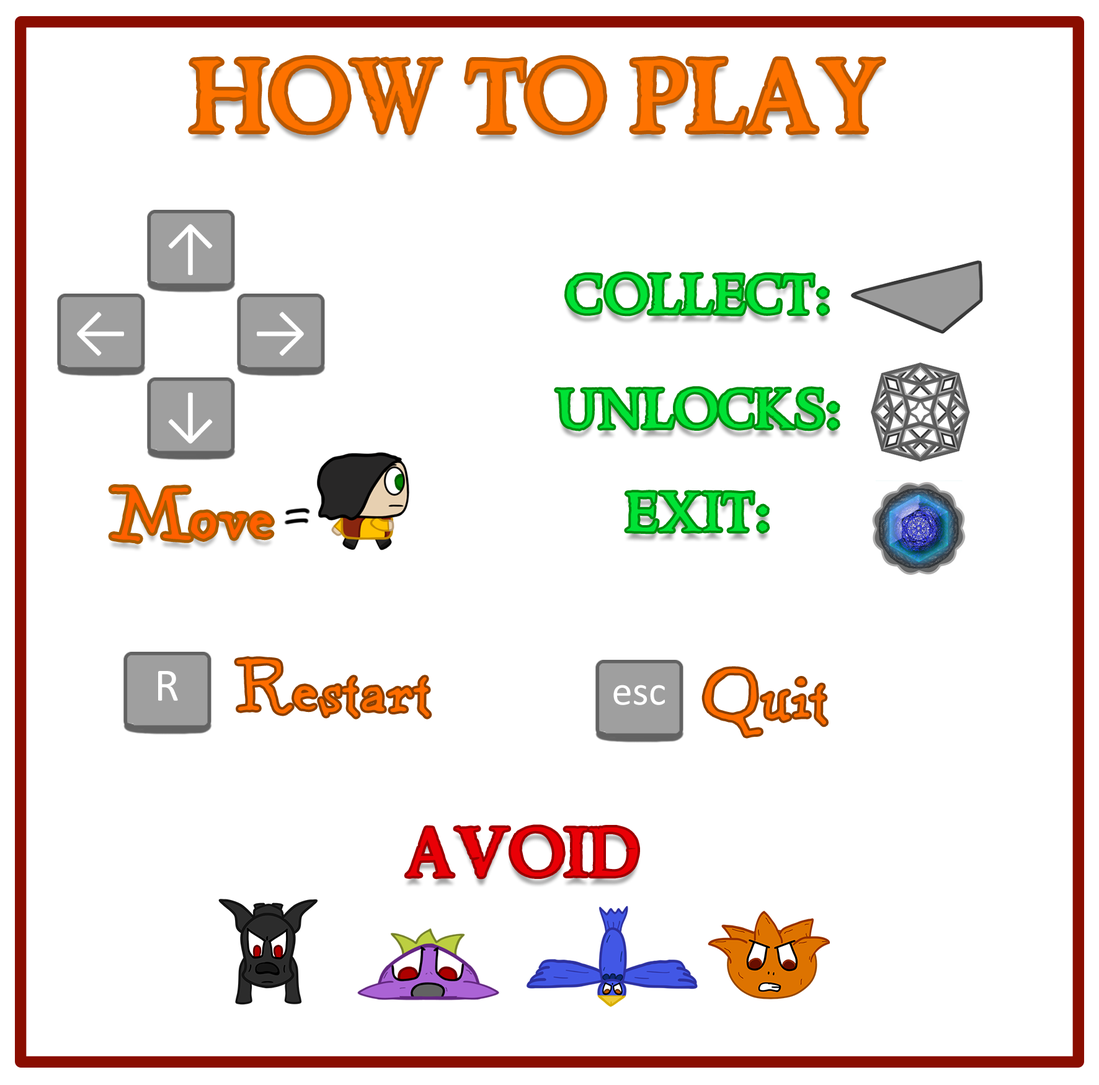
<style>
.page{position:relative;width:1099px;height:1085px;background:#ffffff}
.page>*{position:absolute;margin:0}
.t1{font:113.8px "Mairon";color:#fe7200}
.t2{font:62px "Calibri";color:#ffffff}
.t3{font:62px "Mairon";color:#00e235}
.t4{font:62px "KentuckyFireplace";color:#ff6000}
.t5{font:62px "KentuckyFireplace";color:#ff6c00}
.t6{font:46.5px "Calibri";color:#ffffff}
.t7{font:41.4px "Calibri";color:#ffffff}
.t8{font:77.6px "Mairon";color:#e90006}
</style>
<div class="page">
<p class="t1" style="left:192px;top:59px;width:691px;height:73px">How to Play</p>
<p class="t2" style="left:168px;top:224px;width:45px;height:51px">↑</p>
<p class="t3" style="left:567px;top:274px;width:261px;height:40px">Collect:</p>
<p class="t2" style="left:77px;top:311px;width:47px;height:45px">←</p>
<p class="t2" style="left:257px;top:311px;width:47px;height:45px">→</p>
<p class="t3" style="left:557px;top:388px;width:281px;height:41px">Unlocks:</p>
<p class="t2" style="left:168px;top:392px;width:45px;height:52px">↓</p>
<p class="t4" style="left:111px;top:487px;width:161px;height:54px">Move</p>
<p class="t3" style="left:627px;top:492px;width:141px;height:40px">Exit:</p>
<p class="t5" style="left:236px;top:658px;width:194px;height:59px">Restart</p>
<p class="t6" style="left:158px;top:671px;width:20px;height:30px">R</p>
<p class="t5" style="left:704px;top:668px;width:122px;height:68px">Quit</p>
<p class="t7" style="left:614px;top:684px;width:51px;height:21px">esc</p>
<p class="t8" style="left:406px;top:826px;width:232px;height:51px">Avoid</p>
</div>
